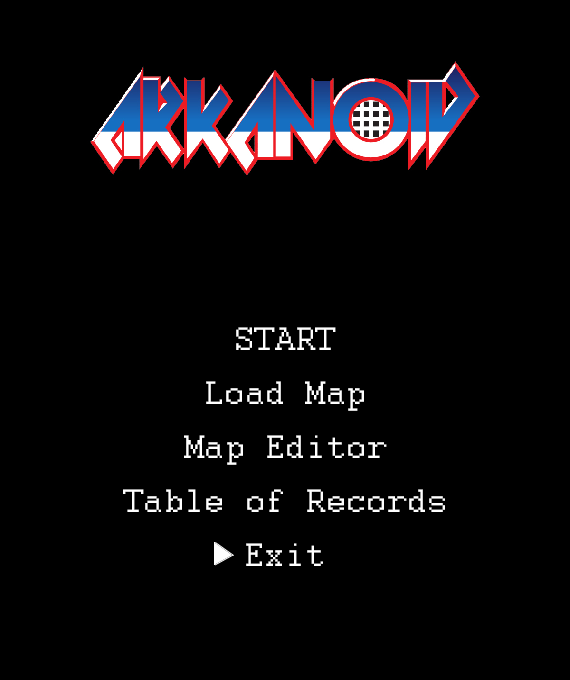
<style>
.page{position:relative;width:570px;height:680px;background:#000000}
.page>*{position:absolute;margin:0}
.t1{font:36px "Courier";color:#ffffff}
</style>
<div class="page">
<p class="t1" style="left:236px;top:327px;width:100px;height:23px">START</p>
<p class="t1" style="left:206px;top:381px;width:158px;height:30px">Load Map</p>
<p class="t1" style="left:184px;top:435px;width:203px;height:30px">Map Editor</p>
<p class="t1" style="left:123px;top:489px;width:322px;height:23px">Table of Records</p>
<p class="t1" style="left:246px;top:543px;width:77px;height:23px">Exit</p>
</div>
